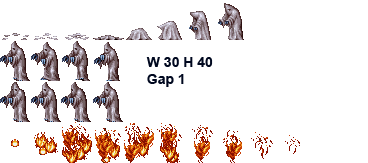
<style>
.page{position:relative;width:368px;height:163px;background:#ffffff}
.page>*{position:absolute;margin:0}
.t1{font:14px "Arial-BoldMT";color:#00081f}
</style>
<div class="page">
<p class="t1" style="left:146px;top:57px;width:67px;height:30px">W 30 H 40 Gap 1</p>
</div>
